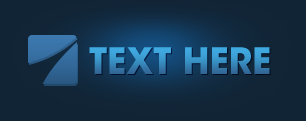
<style>
.page{position:relative;width:306px;height:121px;background:#112435}
.page>*{position:absolute;margin:0}
.t1{font:36px "ITCAvantGardeStd-Bold";text-transform:uppercase}
</style>
<div class="page">
<p class="t1" style="left:89px;top:47px;width:181px;height:27px">Text here</p>
</div>
